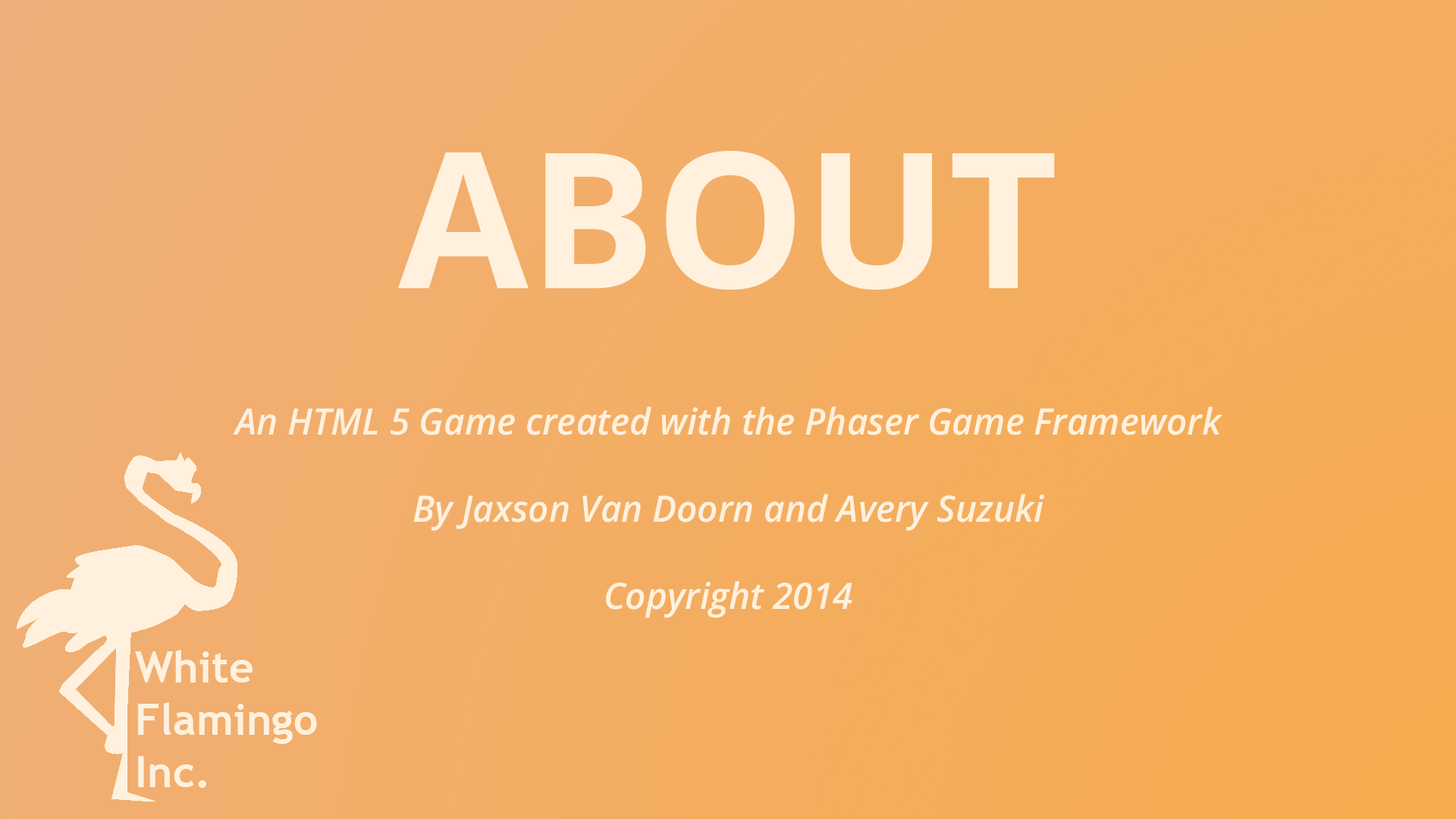
<style>
.page{position:relative;width:1456px;height:819px}
.page>*{position:absolute;margin:0}
.t1{font:36.4px "OpenSans-SemiboldItalic";color:#fff1dd}
.t2{font:49px "OpenSans-Bold";color:#8f8b8b}
.t3{font:189.6px "OpenSans-Bold";color:#fff1dd}
.t4{font:43.5px "TrebuchetMS-Bold";color:#fff1dd}
</style>
<div class="page">
<p class="t1" style="left:233px;top:151px;width:989px;height:467px;text-align:center"><span class="t2"><br><br><br></span><span class="t3">ABOUT<br><br></span><br>An HTML 5 Game created with the Phaser Game Framework<br><br>By Jaxson Van Doorn and Avery Suzuki<br><br>Copyright 2014</p>
<p class="t4" style="left:135px;top:650px;width:182px;height:138px">White <br>Flamingo<br>Inc.</p>
</div>
